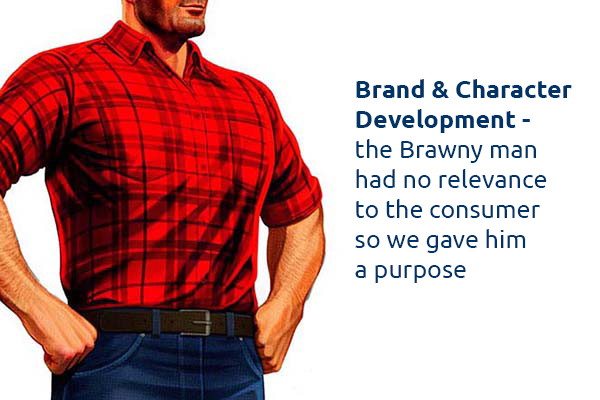
<style>
.page{position:relative;width:600px;height:400px;background:#ffffff}
.page>*{position:absolute;margin:0}
.t1{font:25px "Ubuntu";color:#003366}
.t2{font:25px "Ubuntu-Bold";color:#003366}
</style>
<div class="page">
<p class="t1" style="left:355px;top:79px;width:217px;height:204px"><span class="t2">Brand &amp; Character<br>Development - <br></span>the Brawny man<br>had no relevance<br>to the consumer<br>so we gave him <br>a purpose</p>
</div>
